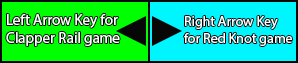
<style>
.page{position:relative;width:298px;height:63px;background:#00f6ff}
.page>*{position:absolute;margin:0}
.t1{font:15px "MyriadPro-Regular";color:#ffffff}
.t2{font:14px "MyriadPro-Regular";color:#ffffff}
</style>
<div class="page">
<p class="t1" style="left:6px;top:14px;width:114px;height:32px">Left Arrow Key for<br>Clapper Rail game</p>
<p class="t2" style="left:184px;top:16px;width:108px;height:30px">Right Arrow Key<br>for Red Knot game</p>
</div>
